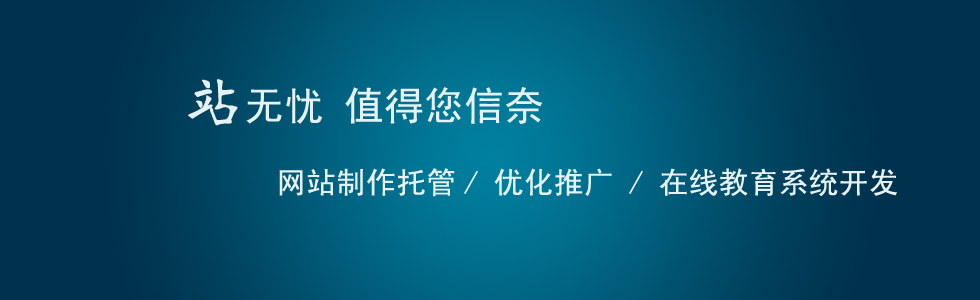
<style>
.page{position:relative;width:980px;height:300px;background:#00324d}
.page>*{position:absolute;margin:0}
.t1{font:40px "SimHei";color:#e5f1f4}
.t2{font:60px "HYh4gj";color:#e5f1f4}
.t3{font:30px "SimHei";color:#e5f1f4}
</style>
<div class="page">
<p class="t1" style="left:188px;top:79px;width:355px;height:47px"><span class="t2">站</span>无忧 值得您信奈</p>
<p class="t3" style="left:279px;top:168px;width:618px;height:29px">网站制作托管/ 优化推广 / 在线教育系统开发</p>
</div>
